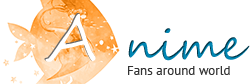
<style>
.page{position:relative;width:250px;height:84px;background:#ffffff}
.page>*{position:absolute;margin:0}
.t1{font:42px "SegoeScript";letter-spacing:0.02em;color:#0085b2}
.t2{font:64px "SegoeScript";letter-spacing:0.02em;color:#ffffff}
.t3{font:12.6px "PTSans-Regular";letter-spacing:0.02em;color:#333333}
</style>
<div class="page">
<p class="t1" style="left:44px;top:13px;width:206px;height:49px"><span class="t2">A </span>nime</p>
<p class="t3" style="left:128px;top:66px;width:102px;height:9px">Fans around world</p>
</div>
